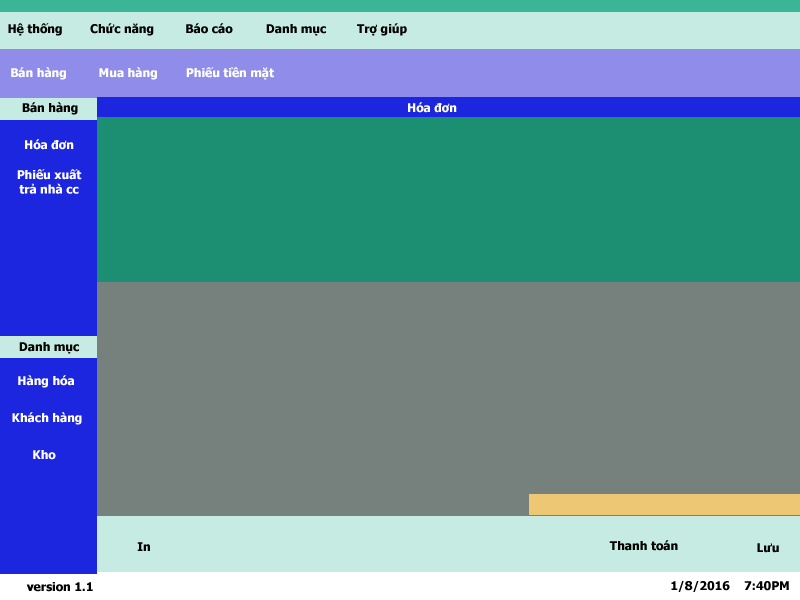
<style>
.page{position:relative;width:800px;height:600px;background:#76817e}
.page>*{position:absolute;margin:0}
.t1{font:12px "Tahoma-Bold";color:#030303}
.t2{font:12px "Tahoma-Bold";color:#ffffff}
.t3{font:12px "Tahoma-Bold";color:#040404}
.t4{font:12px "Tahoma-Bold";color:#fdfdfd}
.t5{font:12px "Tahoma-Bold";color:#020202}
</style>
<div class="page">
<p class="t1" style="left:8px;top:23px;width:54px;height:13px">Hệ thống</p>
<p class="t1" style="left:90px;top:23px;width:64px;height:13px">Chức năng</p>
<p class="t1" style="left:186px;top:23px;width:47px;height:11px">Báo cáo</p>
<p class="t1" style="left:266px;top:24px;width:60px;height:12px">Danh mục</p>
<p class="t1" style="left:357px;top:23px;width:50px;height:13px">Trợ giúp</p>
<p class="t2" style="left:11px;top:67px;width:263px;height:13px">Bán hàng         Mua hàng        Phiếu tiền mặt</p>
<p class="t3" style="left:22px;top:102px;width:56px;height:13px">Bán hàng</p>
<p class="t4" style="left:408px;top:102px;width:49px;height:11px">Hóa đơn</p>
<p class="t2" style="left:25px;top:139px;width:49px;height:11px">Hóa đơn</p>
<p class="t2" style="left:17px;top:169px;width:65px;height:25px;text-align:center">Phiếu xuất<br>trả nhà cc</p>
<p class="t3" style="left:19px;top:342px;width:60px;height:12px">Danh mục</p>
<p class="t2" style="left:18px;top:375px;width:56px;height:13px">Hàng hóa</p>
<p class="t2" style="left:12px;top:412px;width:70px;height:13px">Khách hàng</p>
<p class="t4" style="left:33px;top:450px;width:23px;height:10px">Kho</p>
<p class="t5" style="left:137px;top:542px;width:13px;height:9px">In</p>
<p class="t5" style="left:609px;top:540px;width:69px;height:11px">Thanh toán</p>
<p class="t5" style="left:757px;top:543px;width:22px;height:10px">Lưu</p>
<p class="t5" style="left:26px;top:582px;width:67px;height:10px">version 1.1</p>
<p class="t5" style="left:671px;top:581px;width:118px;height:11px">1/8/2016    7:40PM</p>
</div>
